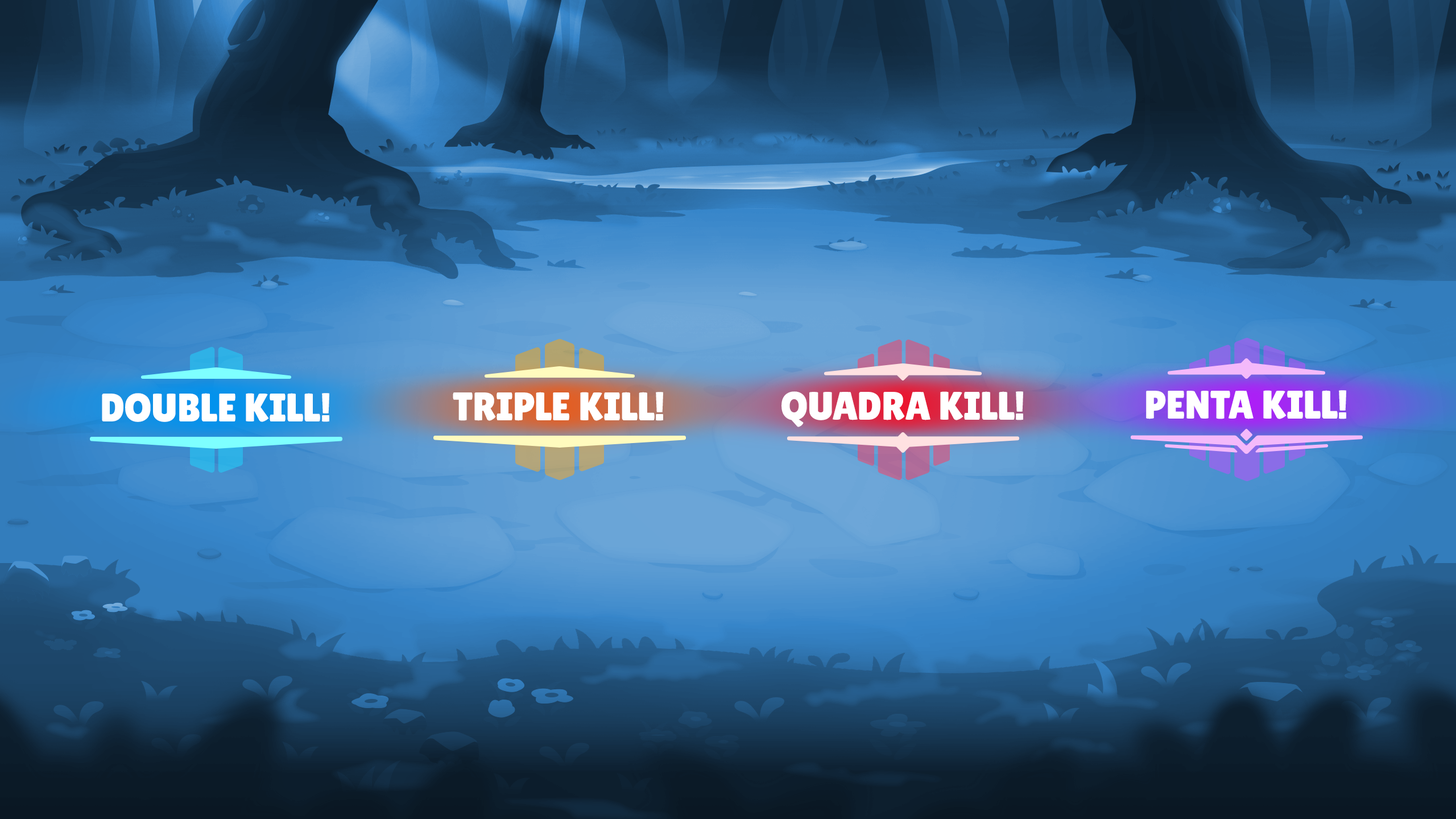
<style>
.page{position:relative;width:1456px;height:819px}
.page>*{position:absolute;margin:0}
.t1{font:39.8px "LilitaOne";color:#ffffff;text-transform:uppercase}
</style>
<div class="page">
<p class="t1" style="left:102px;top:393px;width:227px;height:29px">Double kill!</p>
<p class="t1" style="left:453px;top:392px;width:210px;height:29px">Triple kill!</p>
<p class="t1" style="left:781px;top:391px;width:242px;height:36px">Quadra kill!</p>
<p class="t1" style="left:1146px;top:390px;width:200px;height:29px">Penta kill!</p>
</div>
